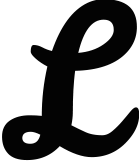
<style>
.page{position:relative;width:139px;height:161px;background:#ffffff}
.page>*{position:absolute;margin:0}
.t1{font:208.3px "LeckerliOne-Regular";color:#030303}
</style>
<div class="page">
<p class="t1" style="left:2px;top:0px;width:138px;height:161px">L</p>
</div>
